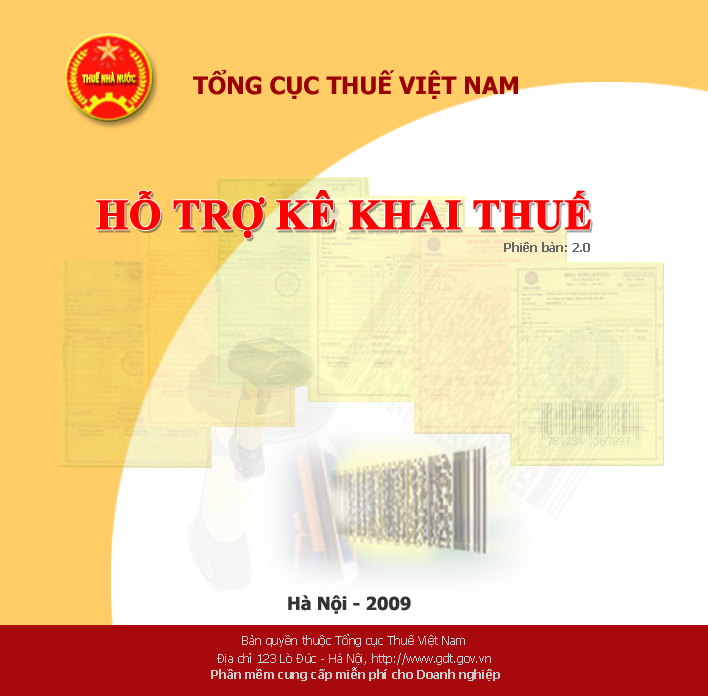
<style>
.page{position:relative;width:708px;height:696px;background:#ffcc66}
.page>*{position:absolute;margin:0}
.t1{font:10.2px "Tahoma-Bold";font-weight:bold;scale:0.58 1}
.t2{font:24px "Tahoma-Bold";color:#990000}
.t3{font:42px "TimesNewRomanPS-BoldMT";color:#ff0000;font-weight:bold}
.t4{font:12px "Tahoma-Bold";color:#666666}
.t5{font:18px "Tahoma-Bold";color:#333333}
.t6{font:12px "Tahoma";color:#cccccc}
.t7{font:12px "Tahoma-Bold";color:#cccccc}
</style>
<div class="page">
<p class="t1" style="left:82px;top:71px;width:54px;height:12px">THUẾ NHÀ NƯỚC</p>
<p class="t2" style="left:193px;top:70px;width:325px;height:29px">TỔNG CỤC THUẾ VIỆT NAM</p>
<p class="t3" style="left:96px;top:190px;width:495px;height:49px">HỖ TRỢ KÊ KHAI THUẾ</p>
<p class="t3" style="left:97px;top:191px;width:495px;height:49px">HỖ TRỢ KÊ KHAI THUẾ</p>
<p class="t4" style="left:504px;top:242px;width:86px;height:10px">Phiên bản: 2.0</p>
<p class="t5" style="left:288px;top:595px;width:123px;height:19px">Hà Nội - 2009</p>
<p class="t6" style="left:242px;top:634px;width:223px;height:13px">Bản quyền thuộc Tổng cục Thuế Việt Nam</p>
<p class="t6" style="left:217px;top:653px;width:274px;height:12px">Địa chỉ 123 Lò Đúc - Hà Nội, http://www.gdt.gov.vn</p>
<p class="t7" style="left:211px;top:667px;width:289px;height:14px">Phần mềm cung cấp miễn phí cho Doanh nghiệp</p>
</div>
